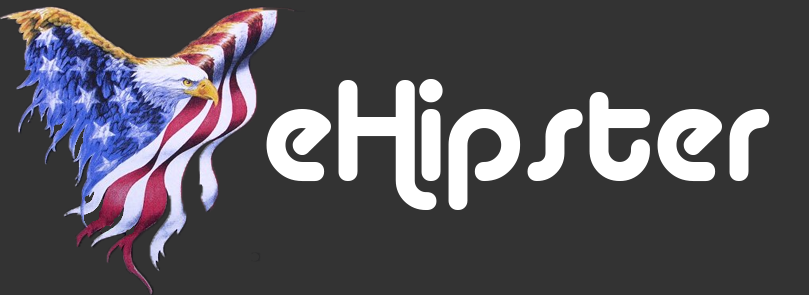
<style>
.page{position:relative;width:809px;height:295px;background:#333333}
.page>*{position:absolute;margin:0}
.t1{font:140px "Alba";color:#ffffff}
</style>
<div class="page">
<p class="t1" style="left:266px;top:79px;width:504px;height:131px">eHipster</p>
</div>
